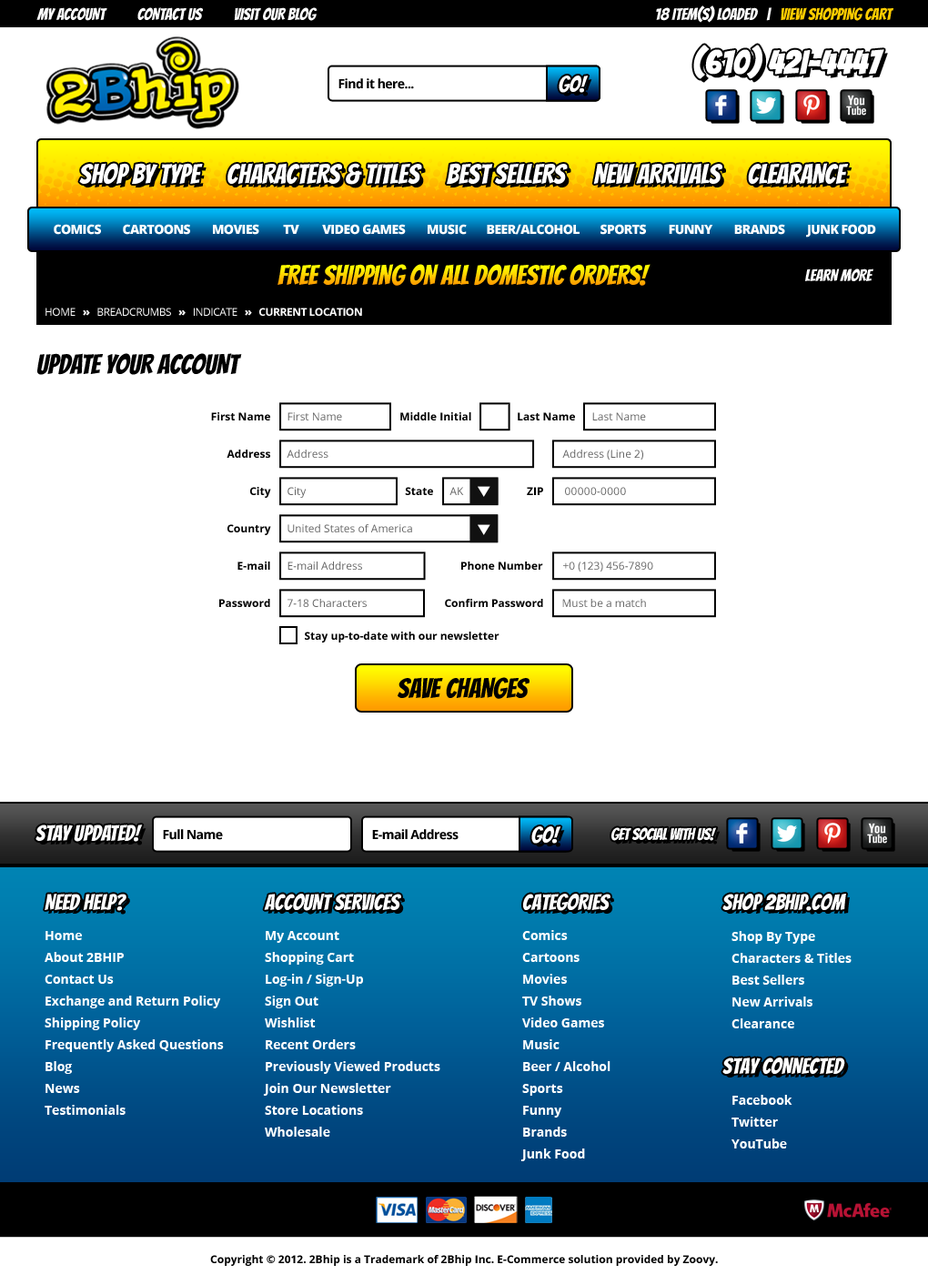
<style>
.page{position:relative;width:928px;height:1285px;background:#ffffff}
.page>*{position:absolute;margin:0}
.t1{font:16.4px "Bangers-Regular";color:#ffffff}
.t2{font:16.4px "Bangers-Regular";color:#ffcc00}
.t3{font:32.8px "Bangers-Regular";color:#ffffff;font-weight:bold}
.t4{font:21.8px "Bangers-Regular";color:#ffffff}
.t5{font:12.7px "OpenSans-Bold";letter-spacing:-0.04em;color:#000000}
.t6{font:27.3px "Bangers-Regular";color:#ffffff}
.t7{font:12.7px "OpenSans-Extrabold";letter-spacing:-0.04em;color:#ffffff}
.t8{font:27.3px "Bangers-Regular"}
.t9{font:10.9px "OpenSans-Bold";letter-spacing:-0.04em;color:#ffffff}
.t10{font:10.9px "OpenSans";letter-spacing:-0.04em;color:#ffffff}
.t11{font:10.9px "OpenSans-Extrabold";letter-spacing:-0.04em;color:#ffffff}
.t12{font:27.3px "Bangers-Regular";color:#000000}
.t13{font:10.9px "OpenSans-Bold";color:#000000}
.t14{font:10.9px "OpenSans";color:#666666}
.t15{font:10.9px "OpenSans";letter-spacing:0.02em;color:#666666}
.t16{font:16.4px "Bangers-Regular";letter-spacing:-0.025em;color:#ffffff}
.t17{font:12.7px/21.8px "OpenSans-Bold";color:#ffffff}
</style>
<div class="page">
<p class="t1" style="left:656px;top:5px;width:238px;height:18px">18 ITEM(S) LOADED   |   <span class="t2">VIEW SHOPPING CART</span></p>
<p class="t1" style="left:36px;top:7px;width:282px;height:14px">MY ACCOUNT          CONTACT US          VISIT OUR BLOG</p>
<p class="t3" style="left:693px;top:45px;width:191px;height:34px">(610) 42I-4447</p>
<p class="t4" style="left:559px;top:76px;width:30px;height:17px">GO!</p>
<p class="t5" style="left:338px;top:78px;width:76px;height:11px">Find it here...</p>
<p class="t6" style="left:79px;top:163px;width:124px;height:21px">SHOP BY TYPE</p>
<p class="t6" style="left:227px;top:163px;width:195px;height:22px">CHARACTERS &amp; TITLES</p>
<p class="t6" style="left:447px;top:163px;width:121px;height:21px">BEST SELLERS</p>
<p class="t6" style="left:593px;top:163px;width:129px;height:22px">NEW ARRIVALS</p>
<p class="t6" style="left:748px;top:163px;width:100px;height:21px">CLEARANCE</p>
<p class="t7" style="left:54px;top:224px;width:47px;height:11px">COMICS</p>
<p class="t7" style="left:123px;top:224px;width:67px;height:11px">CARTOONS</p>
<p class="t7" style="left:213px;top:224px;width:46px;height:11px">MOVIES</p>
<p class="t7" style="left:283px;top:225px;width:16px;height:9px">TV</p>
<p class="t7" style="left:322px;top:224px;width:84px;height:11px">VIDEO GAMES</p>
<p class="t7" style="left:428px;top:224px;width:39px;height:11px">MUSIC</p>
<p class="t7" style="left:487px;top:224px;width:93px;height:11px">BEER/ALCOHOL</p>
<p class="t7" style="left:601px;top:224px;width:45px;height:11px">SPORTS</p>
<p class="t7" style="left:669px;top:225px;width:44px;height:10px">FUNNY</p>
<p class="t7" style="left:734px;top:224px;width:51px;height:11px">BRANDS</p>
<p class="t7" style="left:806px;top:224px;width:70px;height:13px">JUNK FOOD</p>
<p class="t8" style="left:278px;top:264px;width:373px;height:22px">FREE SHIPPING ON ALL DOMESTIC ORDERS!</p>
<p class="t1" style="left:805px;top:268px;width:69px;height:13px">LEARN MORE</p>
<p class="t9" style="left:45px;top:308px;width:317px;height:8px"><span class="t10">HOME   </span><span class="t11">»</span><span class="t10">   BREADCRUMBS   </span><span class="t11">»</span><span class="t10">   INDICATE   </span><span class="t11">»   </span>CURRENT LOCATION</p>
<p class="t12" style="left:37px;top:353px;width:205px;height:22px">UPDATE YOUR ACCOUNT</p>
<p class="t13" style="left:211px;top:412px;width:59px;height:8px">First Name</p>
<p class="t14" style="left:288px;top:412px;width:54px;height:8px">First Name</p>
<p class="t13" style="left:400px;top:412px;width:71px;height:8px">Middle Initial</p>
<p class="t13" style="left:518px;top:412px;width:57px;height:8px">Last Name</p>
<p class="t14" style="left:592px;top:412px;width:54px;height:8px">Last Name</p>
<p class="t13" style="left:227px;top:449px;width:43px;height:9px">Address</p>
<p class="t14" style="left:287px;top:449px;width:41px;height:9px">Address</p>
<p class="t14" style="left:562px;top:449px;width:81px;height:11px">Address (Line 2)</p>
<p class="t13" style="left:250px;top:487px;width:21px;height:11px">City</p>
<p class="t14" style="left:288px;top:487px;width:19px;height:11px">City</p>
<p class="t13" style="left:405px;top:487px;width:28px;height:8px">State</p>
<p class="t14" style="left:449px;top:487px;width:15px;height:8px">AK</p>
<p class="t13" style="left:527px;top:487px;width:16px;height:8px">ZIP</p>
<p class="t15" style="left:565px;top:487px;width:61px;height:8px">00000-0000</p>
<p class="t13" style="left:227px;top:524px;width:44px;height:11px">Country</p>
<p class="t14" style="left:288px;top:524px;width:124px;height:8px">United States of America</p>
<p class="t13" style="left:237px;top:561px;width:33px;height:9px">E-mail</p>
<p class="t14" style="left:288px;top:561px;width:74px;height:9px">E-mail Address</p>
<p class="t13" style="left:461px;top:561px;width:82px;height:9px">Phone Number</p>
<p class="t14" style="left:563px;top:561px;width:90px;height:10px">+0 (123) 456-7890</p>
<p class="t13" style="left:219px;top:599px;width:51px;height:8px">Password</p>
<p class="t14" style="left:288px;top:599px;width:79px;height:8px">7-18 Characters</p>
<p class="t13" style="left:445px;top:599px;width:98px;height:8px">Confirm Password</p>
<p class="t14" style="left:562px;top:599px;width:84px;height:8px">Must be a match</p>
<p class="t13" style="left:305px;top:631px;width:195px;height:11px">Stay up-to-date with our newsletter</p>
<p class="t12" style="left:398px;top:677px;width:132px;height:22px">SAVE CHANGES</p>
<p class="t4" style="left:35px;top:824px;width:108px;height:18px">STAY UPDATED!</p>
<p class="t5" style="left:163px;top:829px;width:60px;height:11px">Full Name</p>
<p class="t5" style="left:372px;top:829px;width:87px;height:11px">E-mail Address</p>
<p class="t4" style="left:531px;top:826px;width:30px;height:17px">GO!</p>
<p class="t16" style="left:611px;top:827px;width:106px;height:14px">GET SOCIAL WITH US!</p>
<p class="t4" style="left:45px;top:894px;width:81px;height:17px">NEED HELP?</p>
<p class="t4" style="left:264px;top:894px;width:137px;height:17px">ACCOUNT SERVICES</p>
<p class="t4" style="left:523px;top:894px;width:88px;height:17px">CATEGORIES</p>
<p class="t4" style="left:722px;top:894px;width:124px;height:17px">SHOP 2BHIP.COM</p>
<p class="t17" style="left:520px;top:930px;width:91px;height:231px">Comics<br>Cartoons<br>Movies<br>TV Shows<br>Video Games<br>Music<br>Beer / Alcohol<br>Sports<br>Funny<br>Brands<br>Junk Food</p>
<p class="t17" style="left:45px;top:931px;width:179px;height:184px">Home<br>About 2BHIP<br>Contact Us<br>Exchange and Return Policy<br>Shipping Policy<br>Frequently Asked Questions<br>Blog<br>News<br>Testimonials</p>
<p class="t17" style="left:263px;top:931px;width:177px;height:205px">My Account<br>Shopping Cart<br>Log-in / Sign-Up<br>Sign Out<br>Wishlist<br>Recent Orders<br>Previously Viewed Products<br>Join Our Newsletter<br>Store Locations<br>Wholesale</p>
<p class="t17" style="left:732px;top:931px;width:120px;height:97px">Shop By Type<br>Characters &amp; Titles<br>Best Sellers<br>New Arrivals<br>Clearance</p>
<p class="t4" style="left:722px;top:1057px;width:123px;height:17px">STAY CONNECTED</p>
<p class="t17" style="left:732px;top:1095px;width:61px;height:53px">Facebook<br>Twitter<br>YouTube</p>
<p class="t13" style="left:210px;top:1255px;width:508px;height:11px">Copyright © 2012. 2Bhip is a Trademark of 2Bhip Inc. E-Commerce solution provided by Zoovy.</p>
</div>
